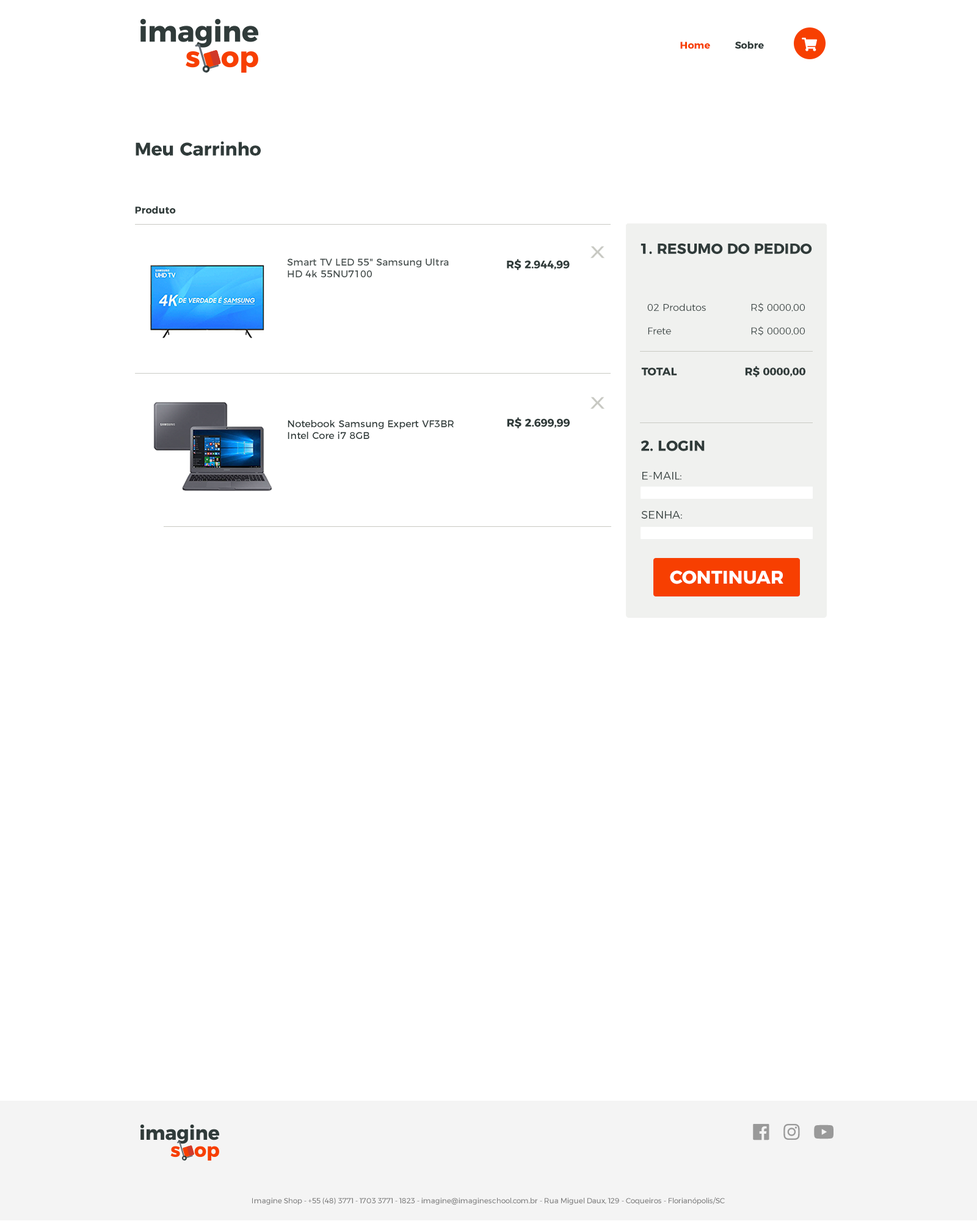
<style>
.page{position:relative;width:977px;height:1221px;background:#ffffff}
.page>*{position:absolute;margin:0}
.t1{font:9.8px "Montserrat-Bold";color:#f73f01}
.t2{font:9.8px "Montserrat-Bold";color:#303b3a}
.t3{font:18.3px "Montserrat-Bold";color:#303b3a}
.t4{font:14.7px "Montserrat-Bold";color:#303b3a}
.t5{font:22px "Montserrat-Light";color:#c8c9c3;scale:1.33 1}
.t6{font:9.8px "Montserrat-Regular";color:#464f4e}
.t7{font:11px "Montserrat-Bold";color:#303b3a}
.t8{font:9.8px "Montserrat-Light";color:#303b3a}
.t9{font:9.8px "Montserrat-Regular";color:#303b3a}
.t10{font:11px "Montserrat-Light";color:#303b3a}
.t11{font:7.3px "Montserrat-Regular";color:#777777}
</style>
<div class="page">
<p class="t1" style="left:680px;top:42px;width:30px;height:7px">Home</p>
<p class="t2" style="left:734px;top:42px;width:30px;height:7px">Sobre</p>
<p class="t3" style="left:136px;top:141px;width:125px;height:15px">Meu Carrinho</p>
<p class="t2" style="left:135px;top:206px;width:41px;height:8px">Produto</p>
<p class="t4" style="left:640px;top:243px;width:172px;height:11px">1. RESUMO DO PEDIDO</p>
<p class="t5" style="left:590px;top:246px;width:14px;height:12px">x</p>
<p class="t6" style="left:287px;top:258px;width:162px;height:20px">Smart TV LED 55" Samsung Ultra <br>HD 4k 55NU7100</p>
<p class="t7" style="left:507px;top:259px;width:63px;height:11px">R$ 2.944,99</p>
<p class="t8" style="left:647px;top:303px;width:158px;height:33px">02 Produtos       R$ 0000,00<br><br>Frete        R$ 0000,00</p>
<p class="t7" style="left:641px;top:366px;width:164px;height:11px">TOTAL        R$ 0000,00</p>
<p class="t5" style="left:590px;top:397px;width:14px;height:12px">x</p>
<p class="t9" style="left:288px;top:420px;width:166px;height:19px">Notebook Samsung Expert VF3BR <br>Intel Core i7 8GB</p>
<p class="t7" style="left:507px;top:417px;width:63px;height:12px">R$ 2.699,99</p>
<p class="t4" style="left:640px;top:440px;width:64px;height:11px">2. LOGIN</p>
<p class="t10" style="left:642px;top:472px;width:39px;height:8px">E-MAIL:</p>
<p class="t10" style="left:641px;top:511px;width:41px;height:8px">SENHA:</p>
<p class="t11" style="left:252px;top:1197px;width:473px;height:8px">Imagine Shop - +55 (48) 3771 - 1703 3771 - 1823 - imagine@imagineschool.com.br - Rua Miguel Daux, 129 - Coqueiros - Florianópolis/SC</p>
</div>
